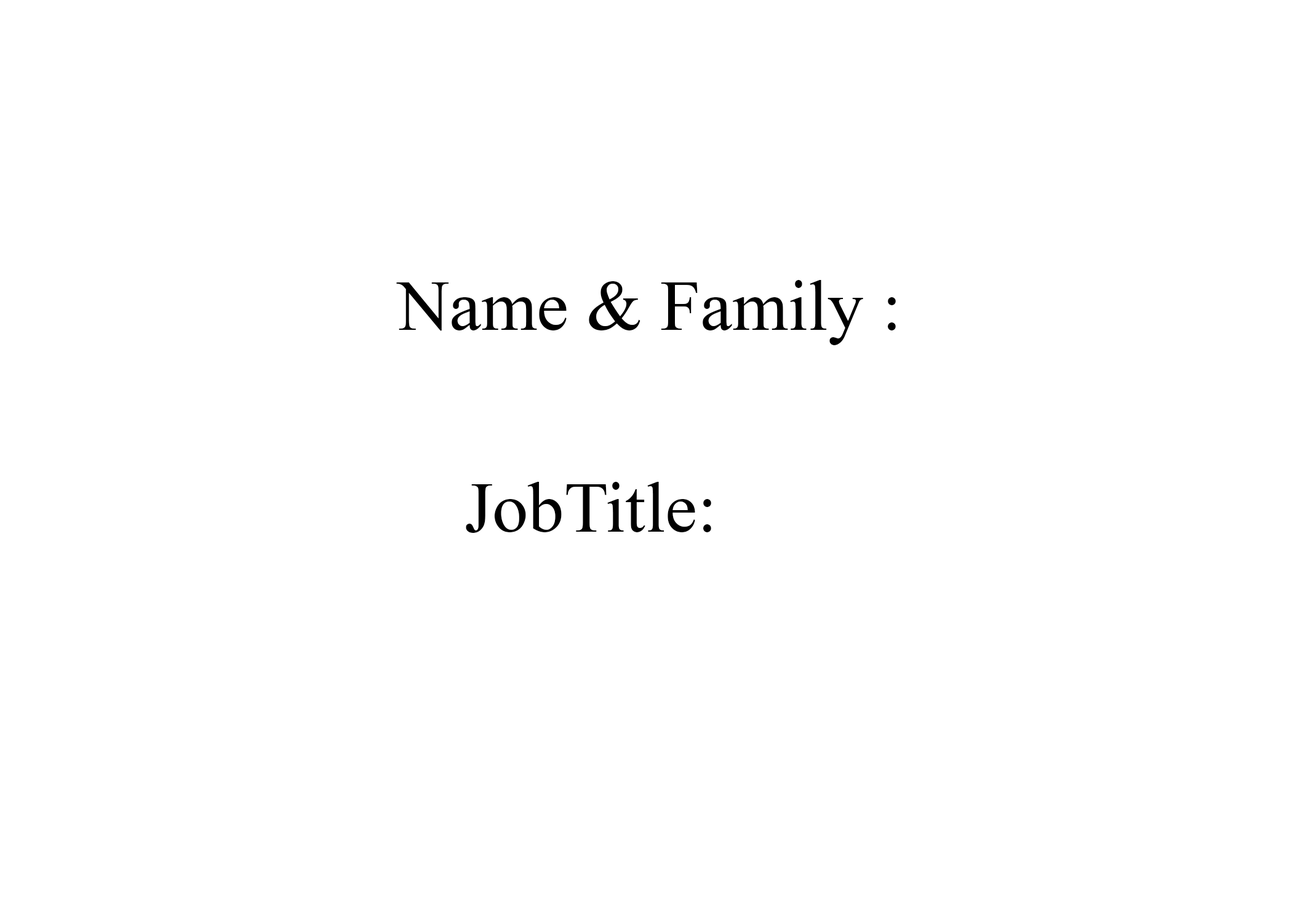
<style>
.page{position:relative;width:1292px;height:923px;background:#ffffff}
.page>*{position:absolute;margin:0}
.t1{font:71.8px "TimesNewRomanPSMT";color:#000000}
</style>
<div class="page">
<p class="t1" style="left:396px;top:280px;width:500px;height:65px">Name &amp; Family :</p>
<p class="t1" style="left:466px;top:482px;width:245px;height:51px">JobTitle:</p>
</div>
